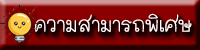
<style>
.page{position:relative;width:200px;height:50px}
.page>*{position:absolute;margin:0}
.t1{font:33px "THMaliGrade6-Bold";color:#fefefe}
</style>
<div class="page">
<p class="t1" style="left:35px;top:13px;width:157px;height:19px">ความสามารถพิเศษ</p>
</div>
